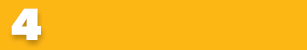
<style>
.page{position:relative;width:307px;height:50px;background:#fdb715}
.page>*{position:absolute;margin:0}
.t1{font:45.4px "Gibson-Heavy";color:#ffffff;text-transform:uppercase}
</style>
<div class="page">
<p class="t1" style="left:11px;top:8px;width:30px;height:32px">4</p>
</div>
